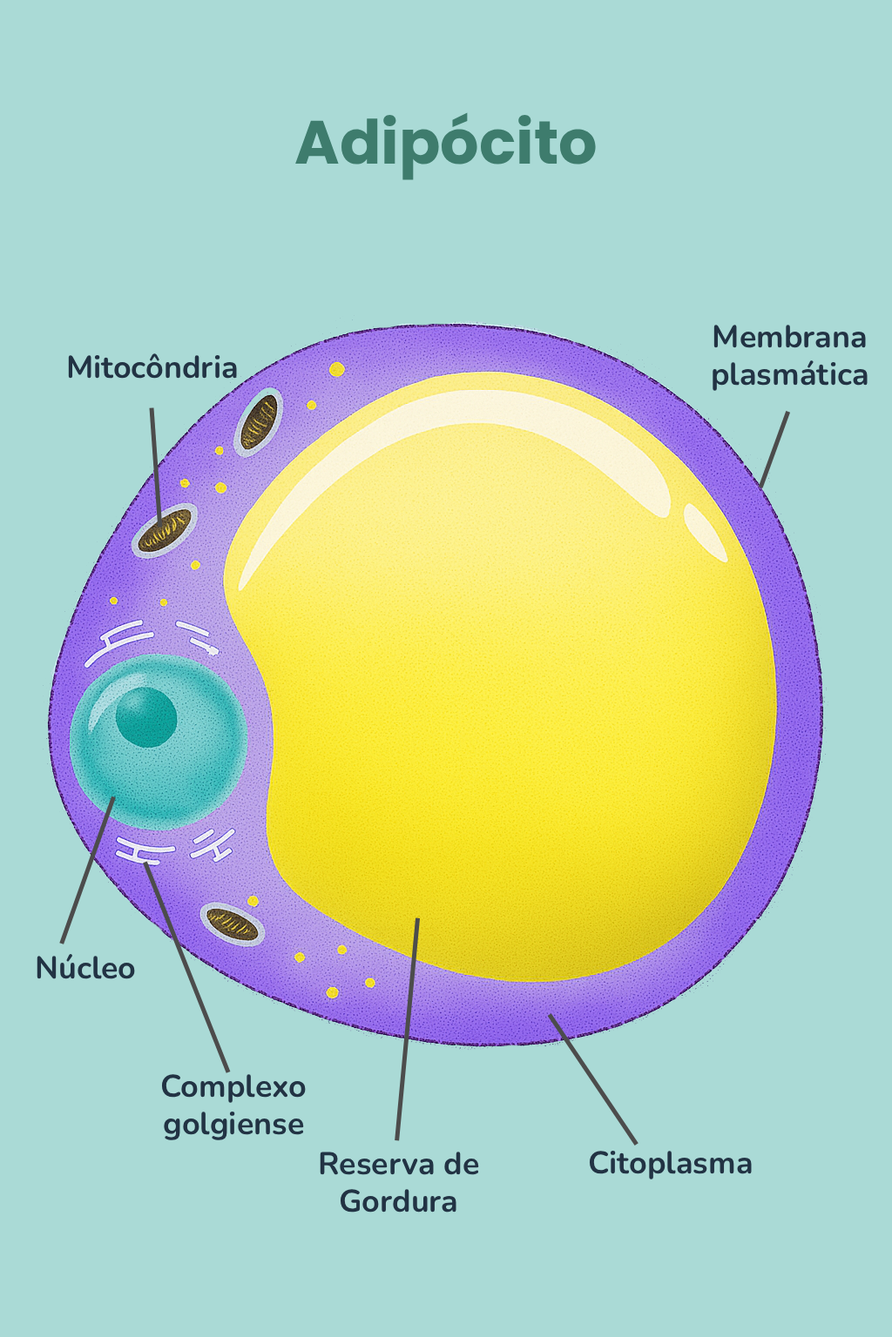
<style>
.page{position:relative;width:892px;height:1337px;background:#aadad6}
.page>*{position:absolute;margin:0}
.t1{font:60.9px "Poppins-Bold";color:#3e7c6d}
.t2{font:31.3px "Nunito-Bold";color:#223344}
</style>
<div class="page">
<p class="t1" style="left:295px;top:112px;width:301px;height:68px">Adipócito</p>
<p class="t2" style="left:712px;top:325px;width:155px;height:66px;text-align:center">Membrana plasmática</p>
<p class="t2" style="left:68px;top:354px;width:169px;height:25px">Mitocôndria</p>
<p class="t2" style="left:37px;top:953px;width:98px;height:27px">Núcleo</p>
<p class="t2" style="left:161px;top:1074px;width:145px;height:67px;text-align:center">Complexo golgiense</p>
<p class="t2" style="left:320px;top:1152px;width:159px;height:61px;text-align:center">Reserva de Gordura</p>
<p class="t2" style="left:589px;top:1151px;width:162px;height:29px">Citoplasma</p>
</div>
